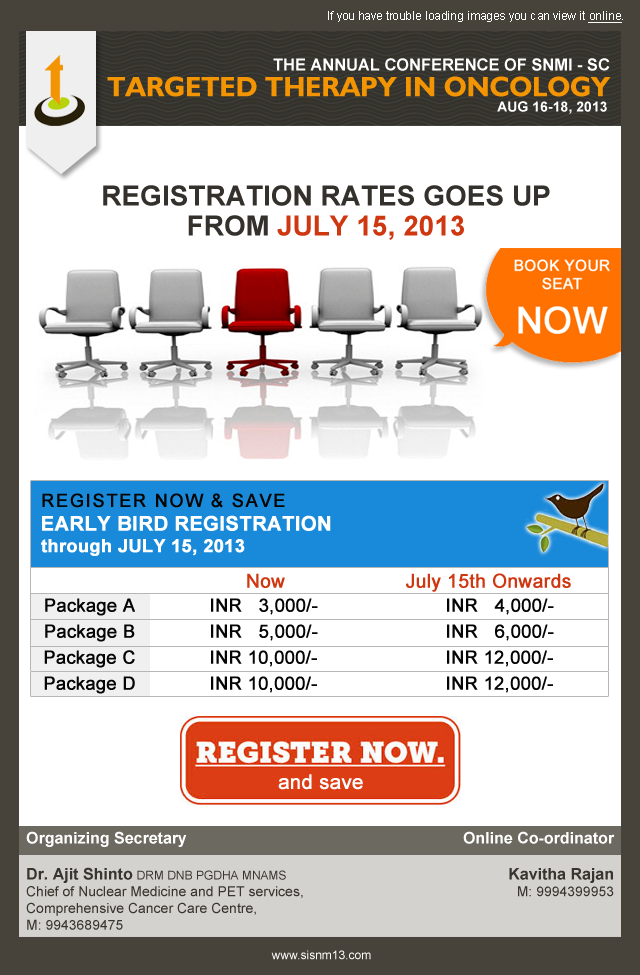
<style>
.page{position:relative;width:640px;height:975px;background:#ffffff}
.page>*{position:absolute;margin:0}
.t1{font:12px "ArialMT";color:#ffffff}
.t2{font:12px "ArialMT";color:#ffffff;text-decoration:underline}
.t3{font:16.4px "Arial-BoldMT";color:#ffffff;text-transform:uppercase}
.t4{font:28.2px "Humanist521BT-Bold";color:#f39402;text-transform:uppercase}
.t5{font:14.1px "Arial-BoldMT";color:#ffffff;text-transform:uppercase}
.t6{font:28px/30px "Arial-BoldMT";color:#34312c;text-transform:uppercase}
.t7{font:28px/30px "Arial-BoldMT";color:#cf3711;text-transform:uppercase}
.t8{font:18px "ArialMT";letter-spacing:0.075em;color:#050505;text-transform:uppercase;font-weight:bold}
.t9{font:20px "Arial-BoldMT";color:#ffffff;text-transform:uppercase;font-weight:bold}
.t10{font:18px "Arial-BoldMT";color:#ffffff;font-weight:bold}
.t11{font:19px "ArialMT";color:#cf3711;font-weight:bold}
.t12{font:18px/26px "ArialMT";color:#050505;font-weight:bold}
.t13{font:20px "ArialMT";color:#ffffff;font-weight:bold}
.t14{font:14px "ArialMT";color:#38352e}
.t15{font:16px "Arial-BoldMT";color:#ffffff}
.t16{font:16px "Arial-BoldMT";color:#38352e}
.t17{font:12px "ArialMT";color:#38352e}
</style>
<div class="page">
<p class="t1" style="left:328px;top:11px;width:295px;height:12px">If you have trouble loading images you can view it <span class="t2">online</span>.</p>
<p class="t3" style="left:273px;top:58px;width:337px;height:13px">THE Annual Conference of SNMI - SC</p>
<p class="t4" style="left:107px;top:76px;width:504px;height:21px">Targeted Therapy in Oncology</p>
<p class="t5" style="left:497px;top:101px;width:110px;height:13px">Aug 16-18, 2013</p>
<p class="t6" style="left:103px;top:185px;width:447px;height:55px;text-align:center">Registration Rates goes up<br>from <span class="t7">July 15, 2013</span></p>
<p class="t8" style="left:42px;top:493px;width:243px;height:15px">Register Now &amp; Save</p>
<p class="t9" style="left:42px;top:515px;width:289px;height:16px">early bird registration</p>
<p class="t10" style="left:41px;top:539px;width:204px;height:17px">through JULY 15, 2013</p>
<p class="t11" style="left:247px;top:573px;width:38px;height:15px">Now</p>
<p class="t11" style="left:406px;top:573px;width:165px;height:19px">July 15th Onwards</p>
<p class="t12" style="left:44px;top:598px;width:91px;height:96px;text-align:center">Package A<br>Package B<br>Package C<br>Package D</p>
<p class="t12" style="left:211px;top:598px;width:107px;height:95px">INR   3,000/- <br>INR   5,000/- <br>INR 10,000/- <br>INR 10,000/-</p>
<p class="t12" style="left:447px;top:598px;width:107px;height:95px">INR   4,000/- <br>INR   6,000/- <br>INR 12,000/- <br>INR 12,000/-</p>
<p class="t13" style="left:278px;top:774px;width:85px;height:16px">and save</p>
<p class="t14" style="left:26px;top:831px;width:277px;height:99px"><span class="t15">Organizing Secretary<br><br></span><span class="t16">Dr. Ajit Shinto </span><span class="t17">DRM DNB PGDHA MNAMS<br></span>Chief of Nuclear Medicine and PET services,<br>Comprehensive Cancer Care Centre,<br>M: 9943689475</p>
<p class="t1" style="left:271px;top:950px;width:100px;height:10px">www.sisnm13.com</p>
</div>
